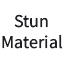
<style>
.page{position:relative;width:64px;height:64px;background:#ffffff}
.page>*{position:absolute;margin:0}
.t1{font:18px "SourceSansRoman-Regular";color:#202024}
</style>
<div class="page">
<p class="t1" style="left:2px;top:14px;width:60px;height:35px;text-align:center">Stun<br>Material</p>
</div>
